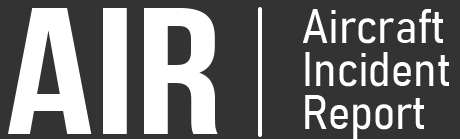
<style>
.page{position:relative;width:460px;height:139px;background:#333333}
.page>*{position:absolute;margin:0}
.t1{font:180px "BebasNeue-Bold";color:#ffffff;scale:1.2 1}
.t2{font:48px/43px "Bahnschrift-SemiLightSemiCondensed";color:#ffffff}
</style>
<div class="page">
<p class="t1" style="left:8px;top:8px;width:210px;height:126px">AIR</p>
<p class="t2" style="left:302px;top:9px;width:147px;height:130px">Aircraft<br>Incident<br>Report</p>
</div>
